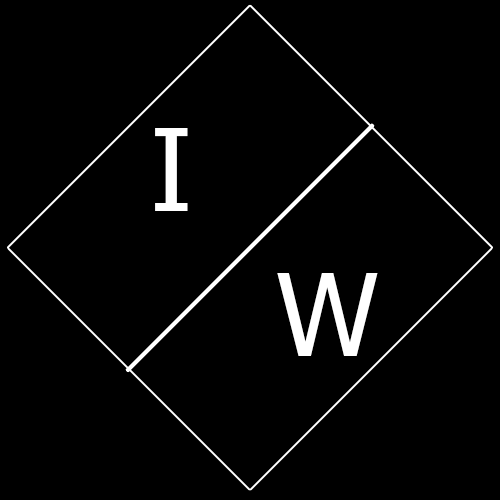
<style>
.page{position:relative;width:500px;height:500px;background:#000000}
.page>*{position:absolute;margin:0}
.t1{font:27.3px "Tahoma";color:#ffffff}
</style>
<div class="page">
<p class="t1" style="left:155px;top:128px;width:33px;height:83px">I</p>
<p class="t1" style="left:277px;top:273px;width:101px;height:83px">W</p>
</div>
